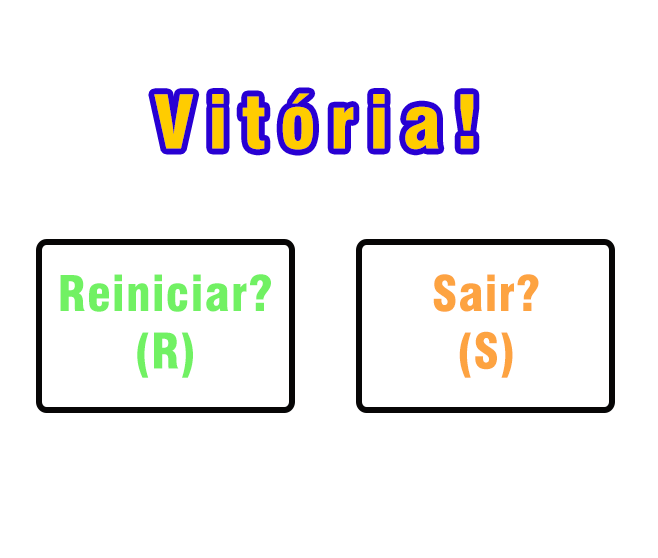
<style>
.page{position:relative;width:658px;height:558px;background:#ffffff}
.page>*{position:absolute;margin:0}
.t1{font:72px "Swiss721BT-BlackCondensed";letter-spacing:0.2em;color:#ffcc00}
.t2{font:48px "Swiss721BT-BlackCondensed";letter-spacing:0.025em;color:#71f163}
.t3{font:48px "Swiss721BT-BlackCondensed";letter-spacing:0.025em;color:#fda341}
</style>
<div class="page">
<p class="t1" style="left:154px;top:93px;width:320px;height:57px">Vitória!</p>
<p class="t2" style="left:60px;top:274px;width:211px;height:104px;text-align:center">Reiniciar?<br>(R)</p>
<p class="t3" style="left:433px;top:274px;width:106px;height:104px;text-align:center">Sair?<br>(S)</p>
</div>
